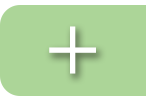
<style>
.page{position:relative;width:150px;height:100px;background:#acd598}
.page>*{position:absolute;margin:0}
.t1{font:100px "DengXian";letter-spacing:0.01em;color:#ffffff}
</style>
<div class="page">
<p class="t1" style="left:49px;top:26px;width:47px;height:48px">+</p>
</div>
